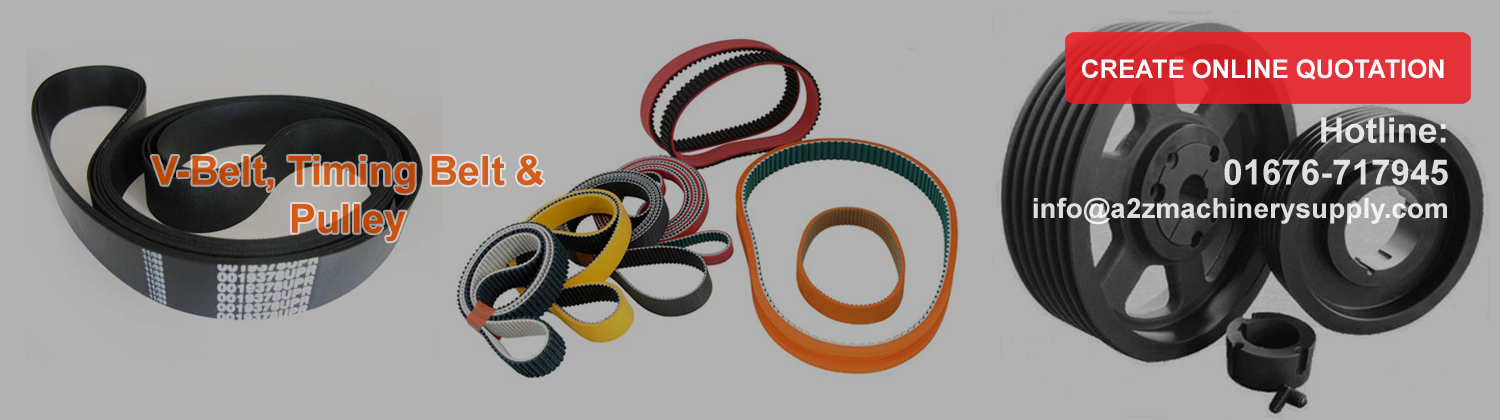
<style>
.page{position:relative;width:1500px;height:420px;background:#b2b2b2}
.page>*{position:absolute;margin:0}
.t1{font:25.6px "Arial-BoldMT";color:#ffffff}
.t2{font:28px "Arial-BoldMT";color:#e1e1e1}
.t3{font:35px "Arial-BoldMT";color:#e1e1e1}
.t4{font:40px "Arial-BoldMT";color:#c95210}
</style>
<div class="page">
<p class="t1" style="left:1082px;top:59px;width:362px;height:21px">CREATE ONLINE QUOTATION</p>
<p class="t2" style="left:1033px;top:117px;width:415px;height:108px;text-align:right"><span class="t3">Hotline:<br>01676-717945<br></span>info@a2zmachinerysupply.com</p>
<p class="t4" style="left:151px;top:155px;width:393px;height:87px;text-align:center">V-Belt, Timing Belt &amp;<br>Pulley</p>
</div>
